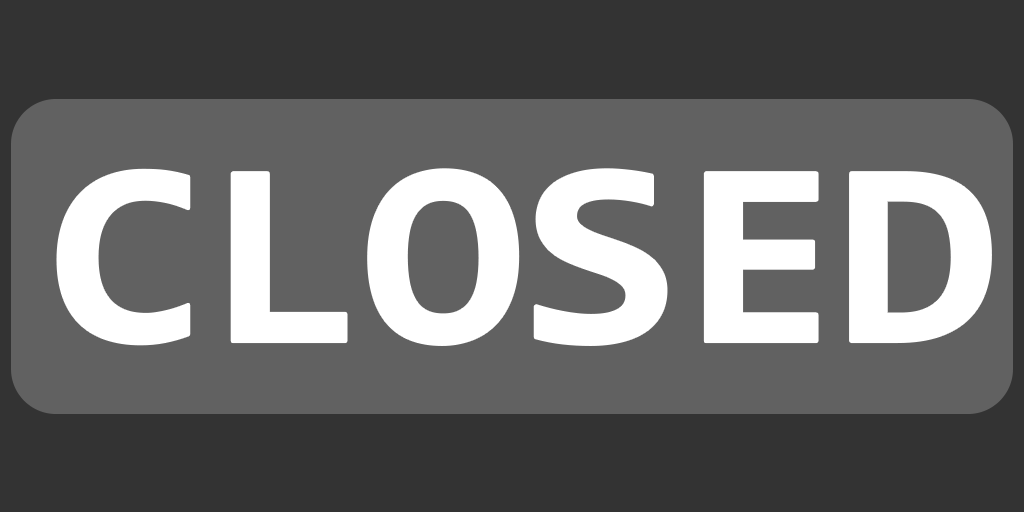
<style>
.page{position:relative;width:1024px;height:512px;background:#616161}
.page>*{position:absolute;margin:0}
.t1{font:262.6px "Consolas-Bold";color:#ffffff;scale:1.1 1}
</style>
<div class="page">
<p class="t1" style="left:58px;top:170px;width:932px;height:174px">CLOSED</p>
</div>
